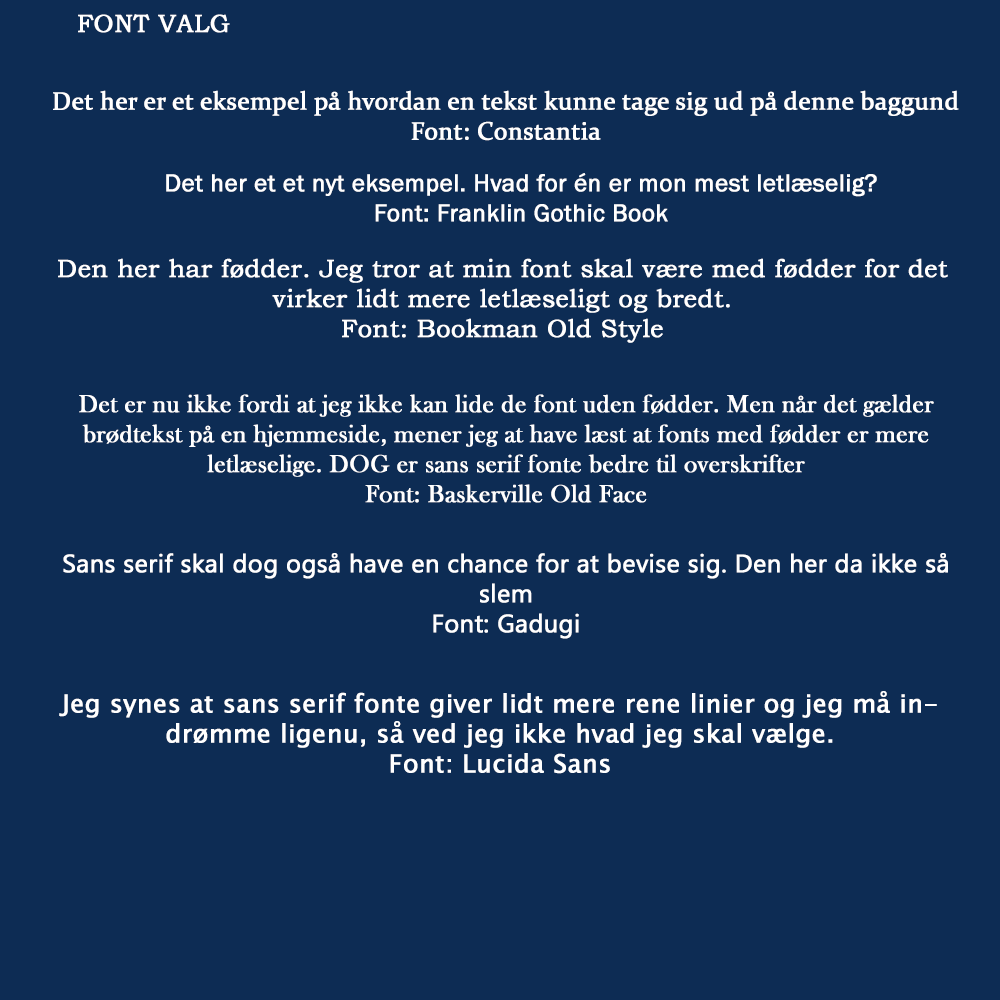
<style>
.page{position:relative;width:1000px;height:1000px;background:#0d2c54}
.page>*{position:absolute;margin:0}
.t1{font:25px "BookmanOldStyle";color:#ffffff;font-weight:bold}
.t2{font:25px "Constantia";color:#ffffff;font-weight:bold}
.t3{font:25px "FranklinGothic-Book";color:#ffffff;font-weight:bold}
.t4{font:25px "BaskOldFace";color:#ffffff;font-weight:bold}
.t5{font:25px "Gadugi";color:#ffffff;font-weight:bold}
.t6{font:25px "LucidaSansUnicode";color:#ffffff;font-weight:bold}
</style>
<div class="page">
<p class="t1" style="left:78px;top:14px;width:152px;height:19px">FONT VALG</p>
<p class="t2" style="left:53px;top:90px;width:906px;height:51px;text-align:center">Det her er et eksempel på hvordan en tekst kunne tage sig ud på denne baggund<br>Font: Constantia</p>
<p class="t3" style="left:166px;top:173px;width:711px;height:49px;text-align:center">Det her et et nyt eksempel. Hvad for én er mon mest letlæselig?<br>Font: Franklin Gothic Book</p>
<p class="t1" style="left:58px;top:258px;width:890px;height:85px;text-align:center">Den her har fødder. Jeg tror at min font skal være med fødder for det virker lidt mere letlæseligt og bredt. <br>Font: Bookman Old Style</p>
<p class="t4" style="left:79px;top:394px;width:855px;height:109px;text-align:center">Det er nu ikke fordi at jeg ikke kan lide de font uden fødder. Men når det gælder brødtekst på en hjemmeside, mener jeg at have læst at fonts med fødder er mere letlæselige. DOG er sans serif fonte bedre til overskrifter<br>Font: Baskerville Old Face</p>
<p class="t5" style="left:63px;top:553px;width:885px;height:86px;text-align:center">Sans serif skal dog også have en chance for at bevise sig. Den her da ikke så slem<br>Font: Gadugi</p>
<p class="t6" style="left:59px;top:691px;width:878px;height:83px;text-align:center">Jeg synes at sans serif fonte giver lidt mere rene linier og jeg må indrømme ligenu, så ved jeg ikke hvad jeg skal vælge. <br>Font: Lucida Sans</p>
</div>
